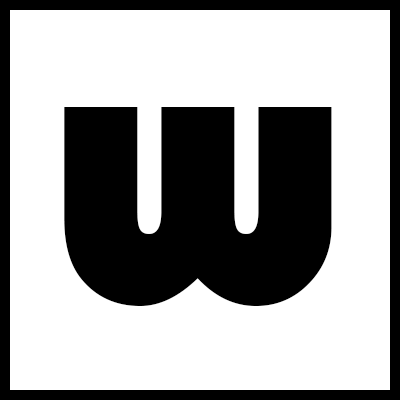
<style>
.page{position:relative;width:400px;height:400px;background:#ffffff}
.page>*{position:absolute;margin:0}
.t1{font:400px "Bauhaus93";color:#000000}
</style>
<div class="page">
<p class="t1" style="left:64px;top:107px;width:268px;height:199px">w</p>
</div>
